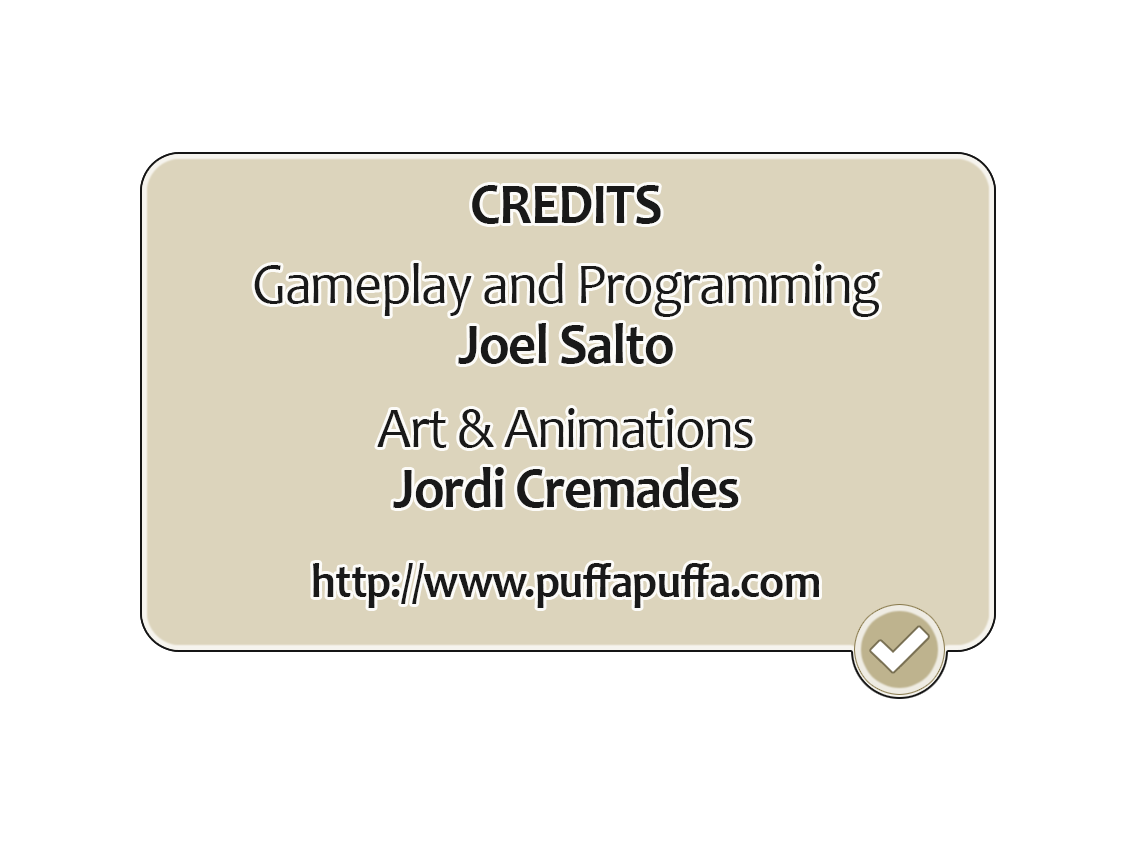
<style>
.page{position:relative;width:1136px;height:852px;background:#ffffff}
.page>*{position:absolute;margin:0}
.t1{font:47.7px/90px "Candara-Bold";letter-spacing:-0.02em;color:#191919;scale:0.94 1}
.t2{font:57.8px/60px "Candara-Bold";letter-spacing:-0.02em;color:#191919;scale:0.94 1}
.t3{font:57.8px/30px "Candara";letter-spacing:-0.02em;color:#191919;scale:0.94 1}
.t4{font:57.8px/70px "Candara";letter-spacing:-0.02em;color:#191919;scale:0.94 1}
</style>
<div class="page">
<p class="t1" style="left:254px;top:185px;width:626px;height:423px;text-align:center"><span class="t2">CREDITS<br><br></span><span class="t3">Gameplay and Programming<br></span><span class="t2">Joel Salto<br><br></span><span class="t4">Art &amp; Animations<br></span><span class="t2">Jordi Cremades<br></span>http://www.puffapuffa.com</p>
</div>
